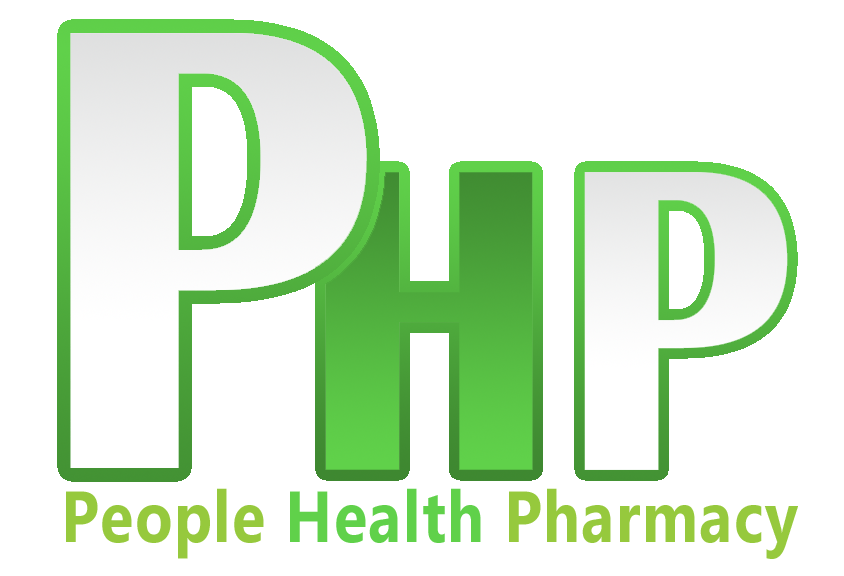
<style>
.page{position:relative;width:844px;height:576px;background:#ffffff}
.page>*{position:absolute;margin:0}
.t1{font:72px "Ebrima-Bold";letter-spacing:0.025em;color:#96c93d;scale:0.85 1}
.t2{font:72px "Ebrima-Bold";letter-spacing:0.025em;color:#60d14a;scale:0.85 1}
</style>
<div class="page">
<p class="t1" style="left:66px;top:488px;width:732px;height:71px">People <span class="t2">Health </span>Pharmacy</p>
</div>
